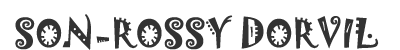
<style>
.page{position:relative;width:400px;height:50px;background:#ffffff}
.page>*{position:absolute;margin:0}
.t1{font:36px "Jokerman-Regular";color:#333333}
</style>
<div class="page">
<p class="t1" style="left:15px;top:14px;width:364px;height:36px">SON-ROSSY DORVIL</p>
</div>
